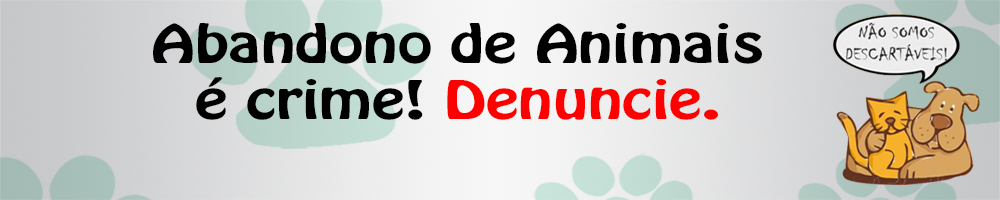
<style>
.page{position:relative;width:1000px;height:200px}
.page>*{position:absolute;margin:0}
.t1{font:46.8px "HoboStd";color:#000000;scale:1.34 1}
.t2{font:46.8px "HoboStd";color:#ff0000;scale:1.34 1}
</style>
<div class="page">
<p class="t1" style="left:153px;top:23px;width:609px;height:97px;text-align:center">Abandono de Animais<br>é crime! <span class="t2">Denuncie.</span></p>
</div>
